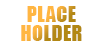
<style>
.page{position:relative;width:103px;height:50px;background:#ffffff}
.page>*{position:absolute;margin:0}
.t1{font:20px/19px "Impact";letter-spacing:0.02em}
</style>
<div class="page">
<p class="t1" style="left:21px;top:6px;width:61px;height:35px;text-align:center">PLACE HOLDER</p>
</div>
